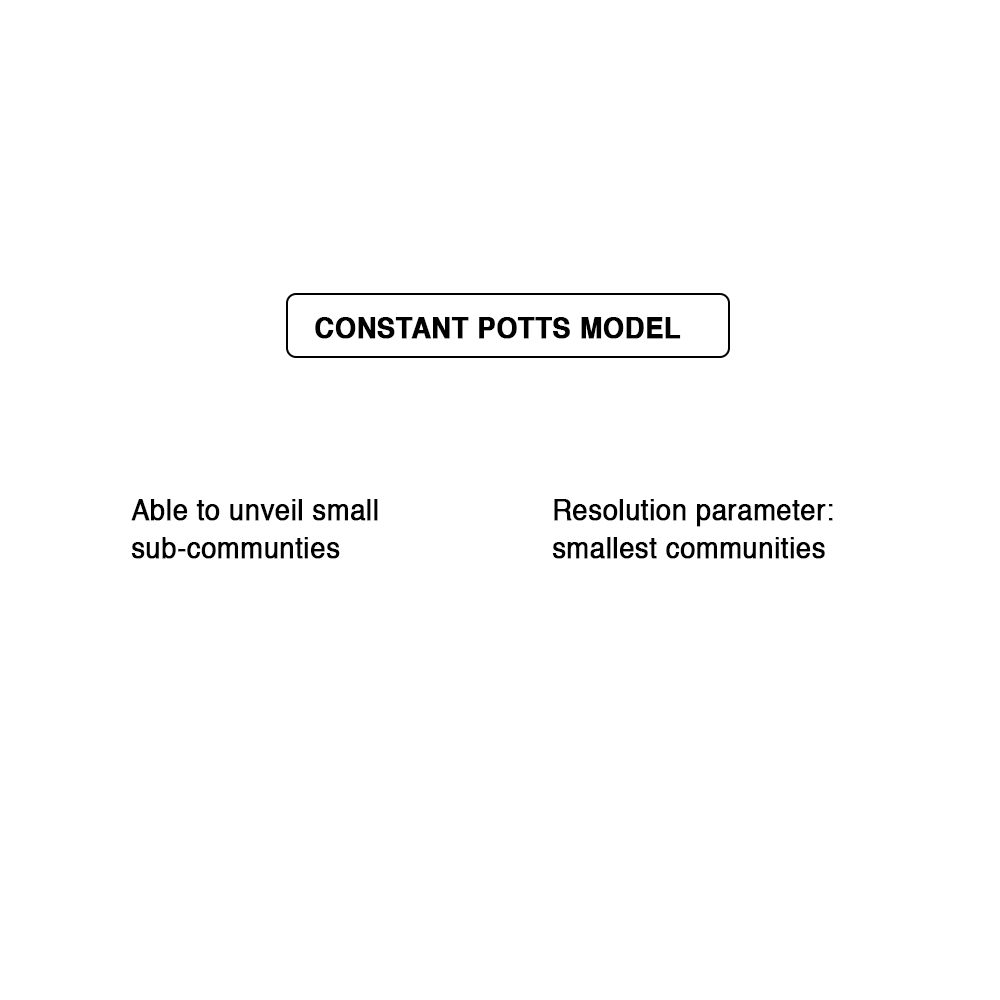
<style>
.page{position:relative;width:1000px;height:1000px;background:#ffffff}
.page>*{position:absolute;margin:0}
.t1{font:29px "Helvetica-Bold";color:#000000;font-weight:bold;scale:0.93 1}
.t2{font:29px/38px "Helvetica";color:#000000;font-weight:bold;scale:0.93 1}
</style>
<div class="page">
<p class="t1" style="left:315px;top:317px;width:366px;height:22px">CONSTANT POTTS MODEL</p>
<p class="t2" style="left:131px;top:499px;width:247px;height:60px">Able to unveil small sub-communties</p>
<p class="t2" style="left:552px;top:499px;width:281px;height:60px">Resolution parameter:<br>smallest communities</p>
</div>
